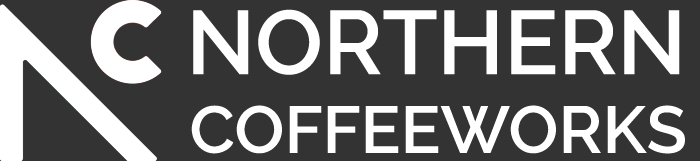
<style>
.page{position:relative;width:700px;height:161px;background:#333333}
.page>*{position:absolute;margin:0}
.t1{font:90px "Raleway-SemiBold";color:#ffffff;text-transform:uppercase}
.t2{font:66px "Raleway-SemiBold";color:#ffffff;text-transform:uppercase}
</style>
<div class="page">
<p class="t1" style="left:193px;top:9px;width:487px;height:66px">NORTHERN</p>
<p class="t2" style="left:191px;top:105px;width:494px;height:49px">COFFEEWORKS</p>
</div>
